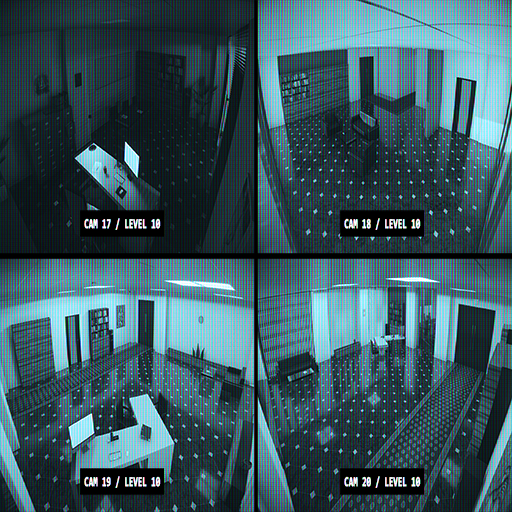
<style>
.page{position:relative;width:512px;height:512px}
.page>*{position:absolute;margin:0}
.t1{font:13.7px "Consolas-Bold";color:#ffffff;font-weight:bold;scale:0.56 1}
</style>
<div class="page">
<p class="t1" style="left:84px;top:218px;width:77px;height:12px">CAM 17 / LEVEL 10</p>
<p class="t1" style="left:344px;top:218px;width:77px;height:12px">CAM 18 / LEVEL 10</p>
<p class="t1" style="left:84px;top:476px;width:77px;height:12px">CAM 19 / LEVEL 10</p>
<p class="t1" style="left:344px;top:476px;width:77px;height:12px">CAM 20 / LEVEL 10</p>
</div>
